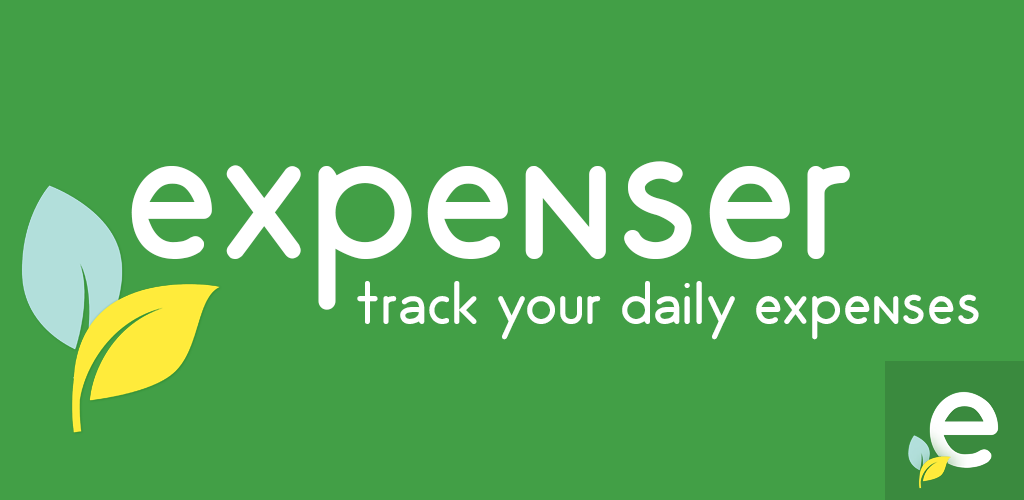
<style>
.page{position:relative;width:1024px;height:500px;background:#429f46}
.page>*{position:absolute;margin:0}
.t1{font:200px "OdinRounded-Light";color:#ffffff}
.t2{font:60px "OdinRounded-Light";color:#ffffff}
</style>
<div class="page">
<p class="t1" style="left:131px;top:161px;width:719px;height:149px">expenser</p>
<p class="t2" style="left:357px;top:281px;width:622px;height:59px">track your daily expenses</p>
</div>
